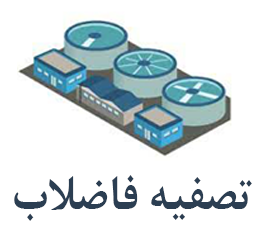
<style>
.page{position:relative;width:261px;height:234px;background:#ffffff}
.page>*{position:absolute;margin:0}
.t1{font:53.3px "BNazaninBold";color:#2b3e52;scale:0.92 1}
</style>
<div class="page">
<p class="t1" style="left:14px;top:175px;width:238px;height:46px">تصفیه فاضلاب</p>
</div>
